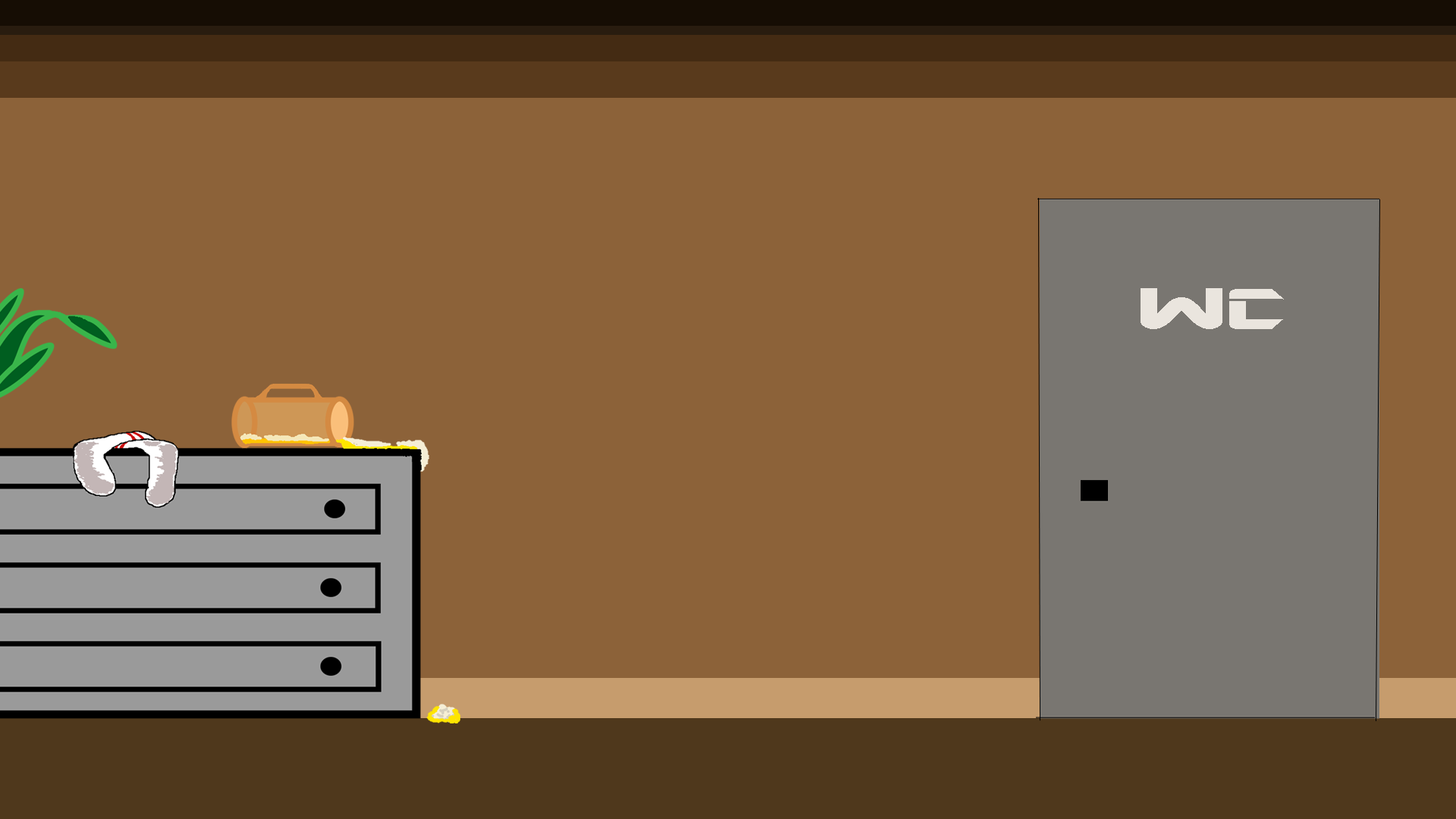
<style>
.page{position:relative;width:1456px;height:819px;background:#8c6239}
.page>*{position:absolute;margin:0}
.t1{font:64.7px "ARDESTINE";color:#eae5de;scale:1.66 1}
</style>
<div class="page">
<p class="t1" style="left:1141px;top:288px;width:143px;height:41px">WC</p>
</div>
